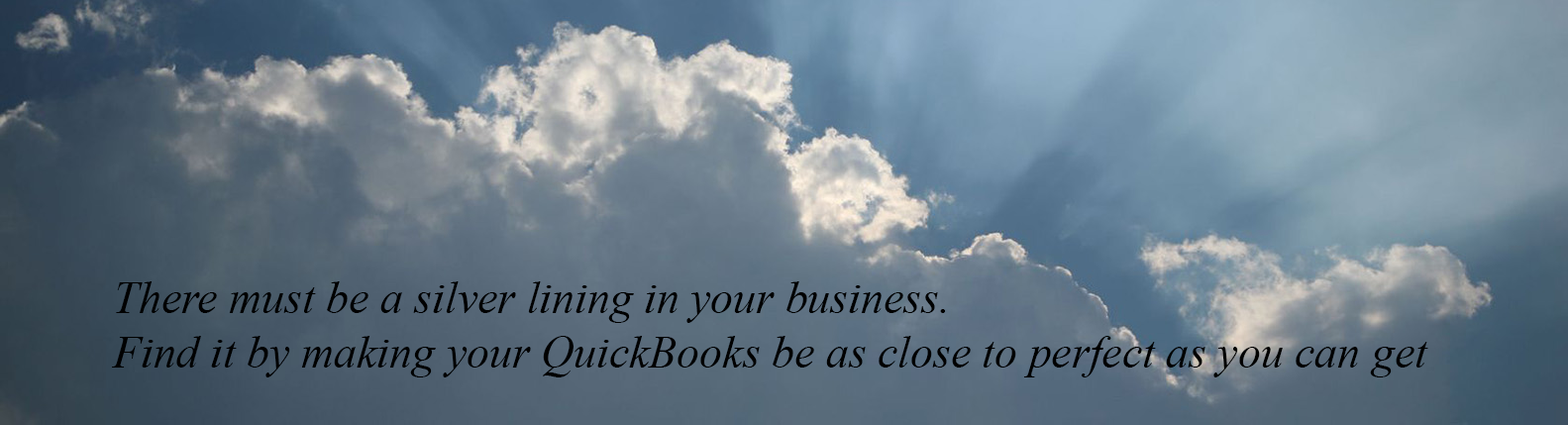
<style>
.page{position:relative;width:1568px;height:425px}
.page>*{position:absolute;margin:0}
.t1{font:45.4px "TimesNewRomanPS-ItalicMT";color:#000000}
</style>
<div class="page">
<p class="t1" style="left:112px;top:281px;width:1316px;height:96px">There must be a silver lining in your business.<br>Find it by making your QuickBooks be as close to perfect as you can get</p>
</div>
